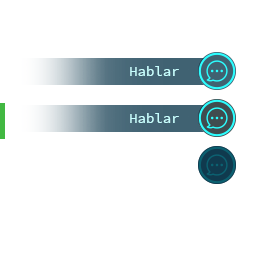
<style>
.page{position:relative;width:256px;height:256px;background:#ffffff}
.page>*{position:absolute;margin:0}
.t1{font:14px "SourceCodePro-Regular";color:#c6ffff}
</style>
<div class="page">
<p class="t1" style="left:130px;top:66px;width:49px;height:10px">Hablar</p>
<p class="t1" style="left:130px;top:113px;width:49px;height:10px">Hablar</p>
</div>
